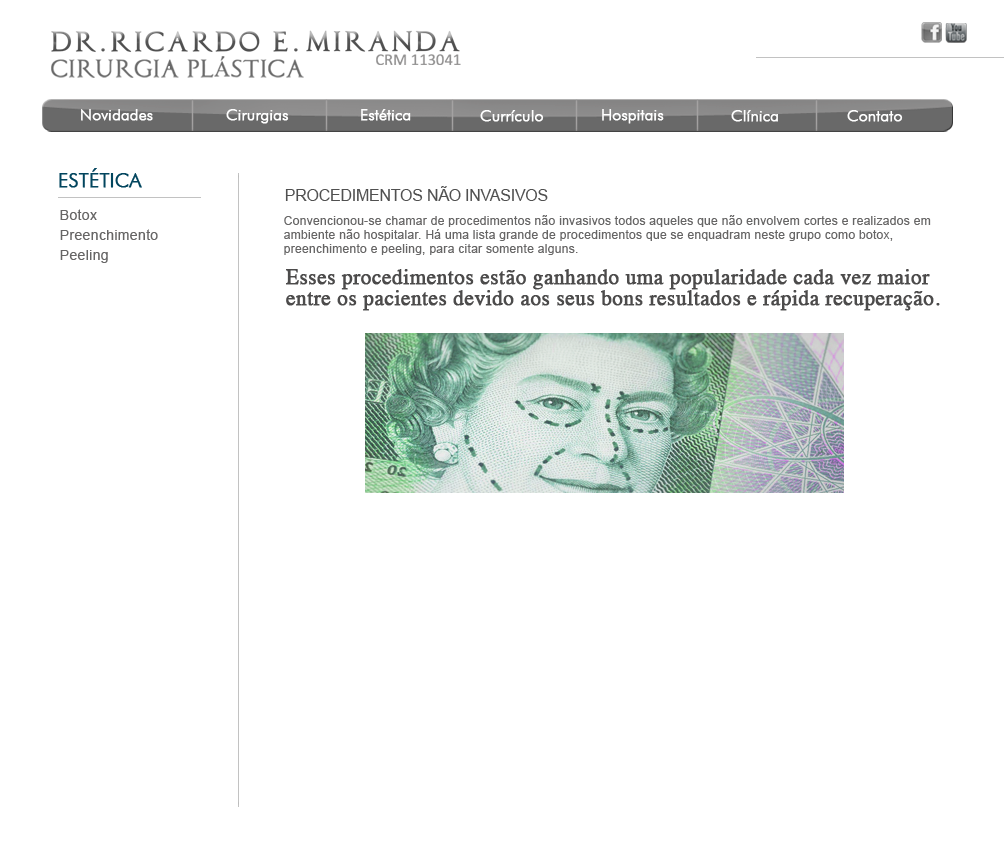
<style>
.page{position:relative;width:1004px;height:848px;background:#ffffff}
.page>*{position:absolute;margin:0}
.t1{font:16px "FuturaBT-Light";letter-spacing:-0.015em;color:#f8f8f8;font-weight:bold}
.t2{font:20px "FuturaBT-Light";letter-spacing:-0.015em;color:#02455e;font-weight:bold}
.t3{font:16px "ArialMT";letter-spacing:-0.015em;color:#505050}
.t4{font:14px/20px "ArialMT";letter-spacing:0.025em;color:#676666}
.t5{font:12px/14px "ArialMT";letter-spacing:0.025em;color:#676666}
.t6{font:21px/21px "Times-Roman";letter-spacing:0.005em;color:#4c4b4b;font-weight:bold}
</style>
<div class="page">
<p class="t1" style="left:81px;top:109px;width:72px;height:12px">Novidades</p>
<p class="t1" style="left:226px;top:109px;width:63px;height:15px">Cirurgias</p>
<p class="t1" style="left:361px;top:109px;width:50px;height:12px">Estética</p>
<p class="t1" style="left:480px;top:110px;width:64px;height:12px">Currículo</p>
<p class="t1" style="left:602px;top:109px;width:62px;height:15px">Hospitais</p>
<p class="t1" style="left:731px;top:110px;width:47px;height:12px">Clínica</p>
<p class="t1" style="left:847px;top:110px;width:56px;height:12px">Contato</p>
<p class="t2" style="left:59px;top:168px;width:83px;height:20px">ESTÉTICA</p>
<p class="t3" style="left:285px;top:186px;width:263px;height:15px">PROCEDIMENTOS NÃO INVASIVOS</p>
<p class="t4" style="left:60px;top:209px;width:98px;height:54px">Botox<br>Preenchimento<br>Peeling</p>
<p class="t5" style="left:284px;top:215px;width:647px;height:40px">Convencionou-se chamar de procedimentos não invasivos todos aqueles que não envolvem cortes e realizados em <br>ambiente não hospitalar. Há uma lista grande de procedimentos que se enquadram neste grupo como botox, <br>preenchimento e peeling, para citar somente alguns.</p>
<p class="t6" style="left:286px;top:269px;width:654px;height:42px">Esses procedimentos estão ganhando uma popularidade cada vez maior <br>entre os pacientes devido aos seus bons resultados e rápida recuperação.</p>
</div>
